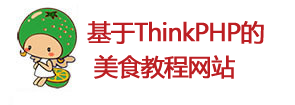
<style>
.page{position:relative;width:295px;height:105px;background:#ffffff}
.page>*{position:absolute;margin:0}
.t1{font:24px/34.1px "MicrosoftYaHei";letter-spacing:-0.05em;color:#bc1e22;font-weight:bold}
</style>
<div class="page">
<p class="t1" style="left:87px;top:21px;width:177px;height:58px">基于ThinkPHP的<br> 美食教程网站</p>
</div>
